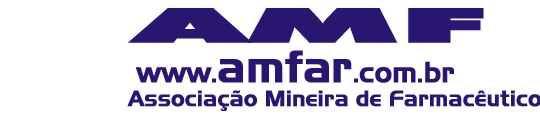
<style>
.page{position:relative;width:540px;height:115px;background:#ffffff}
.page>*{position:absolute;margin:0}
.t1{font:46.6px "FuturaBT-ExtraBlack";color:#29166f;font-weight:bold;scale:3.22 1}
.t2{font:28px "AeroRegularSWFTE";color:#29166f;font-weight:bold}
.t3{font:43.5px "AeroRegularSWFTE";color:#29166f;font-weight:bold}
</style>
<div class="page">
<p class="t1" style="left:128px;top:8px;width:356px;height:35px">AMF</p>
<p class="t2" style="left:136px;top:50px;width:318px;height:33px">www.<span class="t3">amfar</span>.com.br</p>
</div>
